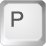
<style>
.page{position:relative;width:46px;height:46px}
.page>*{position:absolute;margin:0}
.t1{font:21.2px "ArialMT";color:#5a5a5a}
</style>
<div class="page">
<p class="t1" style="left:11px;top:11px;width:13px;height:16px">P</p>
</div>
